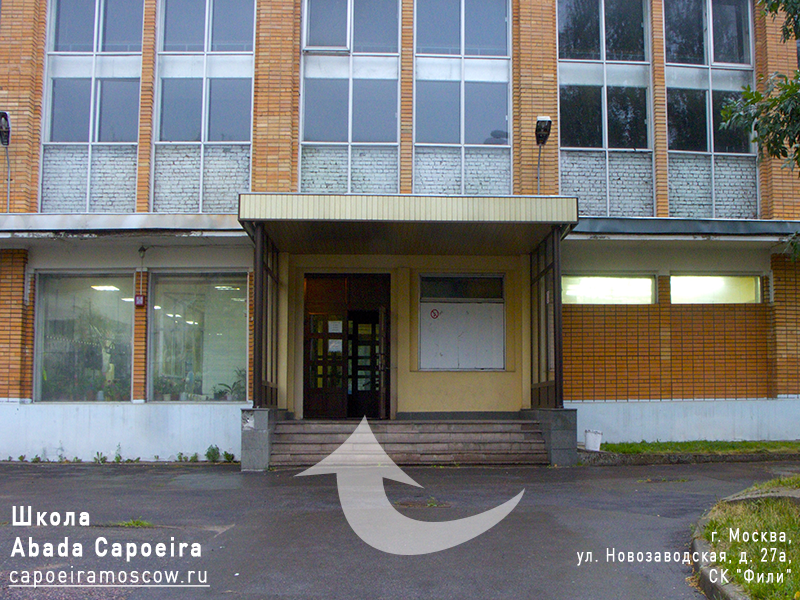
<style>
.page{position:relative;width:800px;height:600px}
.page>*{position:absolute;margin:0}
.t1{font:26.8px/30.7px "DINPro-Medium";letter-spacing:0.1em;color:#ffffff;font-weight:bold;scale:0.82 1}
.t2{font:17.6px/20.2px "DINPro-Light";letter-spacing:0.1em;color:#ffffff;font-weight:bold;scale:0.82 1}
.t3{font:22.9px "DINPro-Light";letter-spacing:0.1em;color:#ffffff;font-weight:bold;text-decoration:underline;scale:0.82 1}
</style>
<div class="page">
<p class="t1" style="left:10px;top:506px;width:191px;height:56px">Школа <br>Abada Capoeira</p>
<p class="t2" style="left:577px;top:528px;width:214px;height:55px;text-align:right">г. Москва,<br>ул. Новозаводская, д. 27а,<br> СК "Фили"</p>
<p class="t3" style="left:8px;top:566px;width:202px;height:22px">capoeiramoscow.ru</p>
</div>
